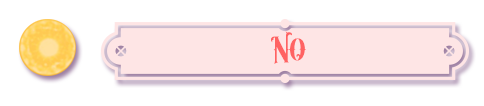
<style>
.page{position:relative;width:484px;height:106px;background:#ffffff}
.page>*{position:absolute;margin:0}
.t1{font:41.7px "Moyers";color:#ff6262}
</style>
<div class="page">
<p class="t1" style="left:271px;top:31px;width:35px;height:33px">No</p>
</div>
